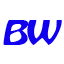
<style>
.page{position:relative;width:64px;height:64px;background:#ffffff}
.page>*{position:absolute;margin:0}
.t1{font:30px "BATAVIA";color:#1100ed}
</style>
<div class="page">
<p class="t1" style="left:3px;top:20px;width:59px;height:25px">BW</p>
</div>
